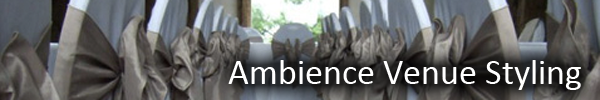
<style>
.page{position:relative;width:600px;height:100px}
.page>*{position:absolute;margin:0}
.t1{font:36px "Calibri";color:#ffffff}
</style>
<div class="page">
<p class="t1" style="left:228px;top:60px;width:353px;height:30px">Ambience Venue Styling</p>
</div>
